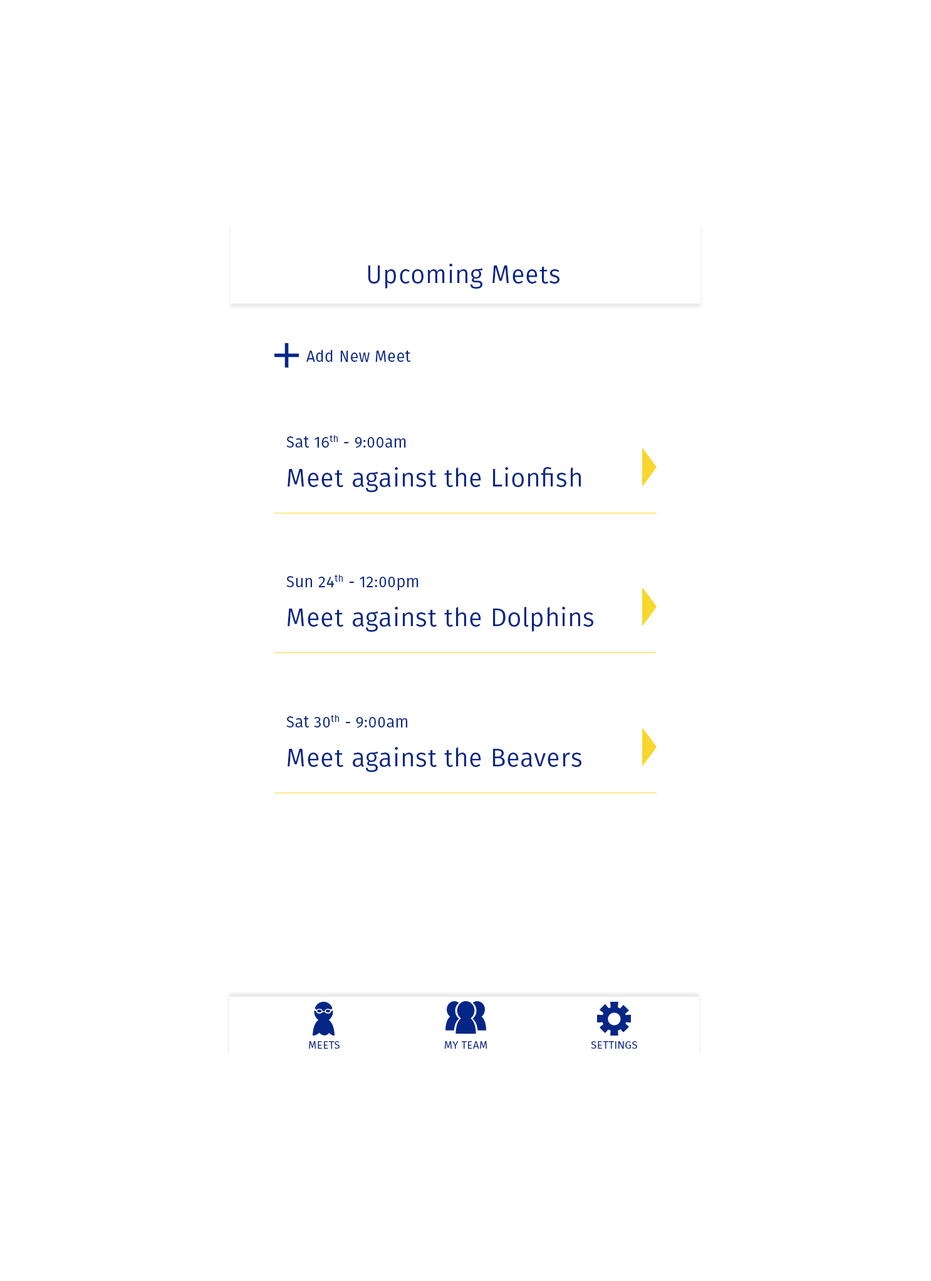
<style>
.page{position:relative;width:931px;height:1281px;background:#ffffff}
.page>*{position:absolute;margin:0}
.t1{font:25.1px "FiraSans-Book";letter-spacing:0.02em;color:#052686}
.t2{font:15.7px "FiraSans-Book";letter-spacing:0.02em;color:#052686}
.t3{font:10.6px "FiraSans-Book";letter-spacing:0.02em;color:#052686;text-transform:uppercase}
</style>
<div class="page">
<p class="t1" style="left:368px;top:264px;width:191px;height:25px">Upcoming Meets</p>
<p class="t2" style="left:306px;top:350px;width:105px;height:12px">Add New Meet</p>
<p class="t2" style="left:286px;top:435px;width:120px;height:13px">Sat 16th - 9:00am</p>
<p class="t1" style="left:287px;top:467px;width:294px;height:25px">Meet against the Lionfish</p>
<p class="t2" style="left:286px;top:575px;width:132px;height:16px">Sun 24th - 12:00pm</p>
<p class="t1" style="left:287px;top:607px;width:306px;height:25px">Meet against the Dolphins</p>
<p class="t2" style="left:286px;top:715px;width:121px;height:13px">Sat 30th - 9:00am</p>
<p class="t1" style="left:287px;top:747px;width:294px;height:25px">Meet against the Beavers</p>
<p class="t3" style="left:309px;top:1041px;width:30px;height:8px">Meets</p>
<p class="t3" style="left:444px;top:1041px;width:43px;height:8px">My Team</p>
<p class="t3" style="left:591px;top:1041px;width:46px;height:8px">Settings</p>
</div>
